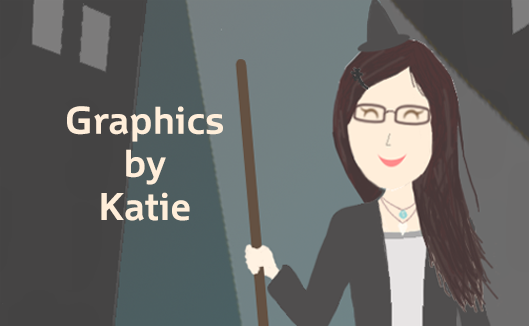
<style>
.page{position:relative;width:529px;height:326px}
.page>*{position:absolute;margin:0}
.t1{font:36px "WascoSans-Bold";color:#ffeeda}
</style>
<div class="page">
<p class="t1" style="left:67px;top:106px;width:156px;height:115px;text-align:center">Graphics<br>by<br>Katie</p>
</div>
